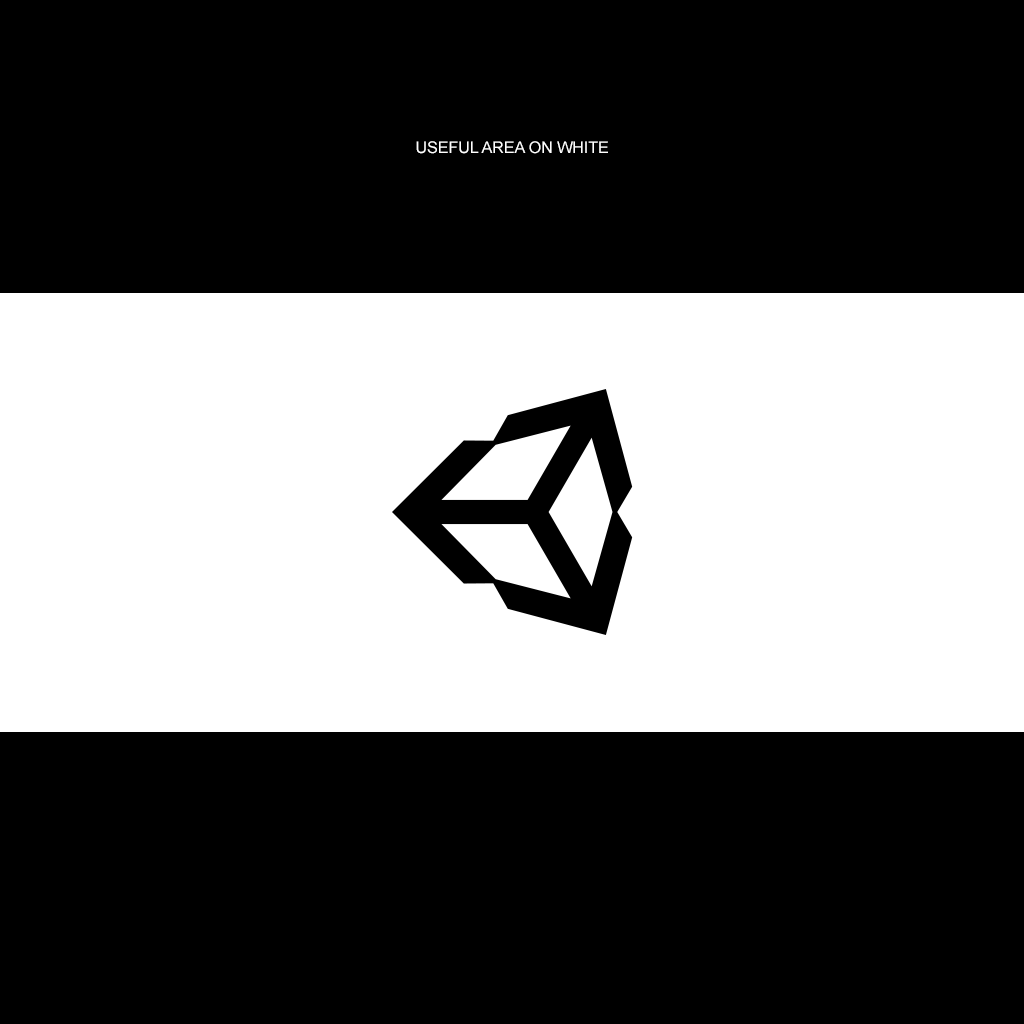
<style>
.page{position:relative;width:1024px;height:1024px;background:#000000}
.page>*{position:absolute;margin:0}
.t1{font:16px "ArialMT";color:#ffffff}
</style>
<div class="page">
<p class="t1" style="left:416px;top:141px;width:192px;height:13px">USEFUL AREA ON WHITE</p>
</div>
